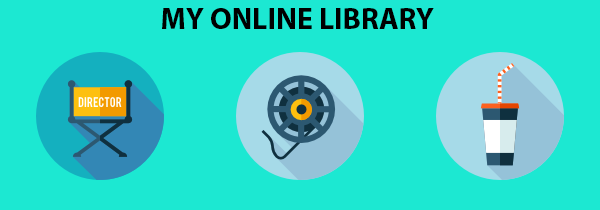
<style>
.page{position:relative;width:600px;height:210px;background:#1ce8d2}
.page>*{position:absolute;margin:0}
.t1{font:30px "MyriadPro-Bold";color:#000000}
</style>
<div class="page">
<p class="t1" style="left:162px;top:8px;width:272px;height:21px">MY ONLINE LIBRARY</p>
</div>
